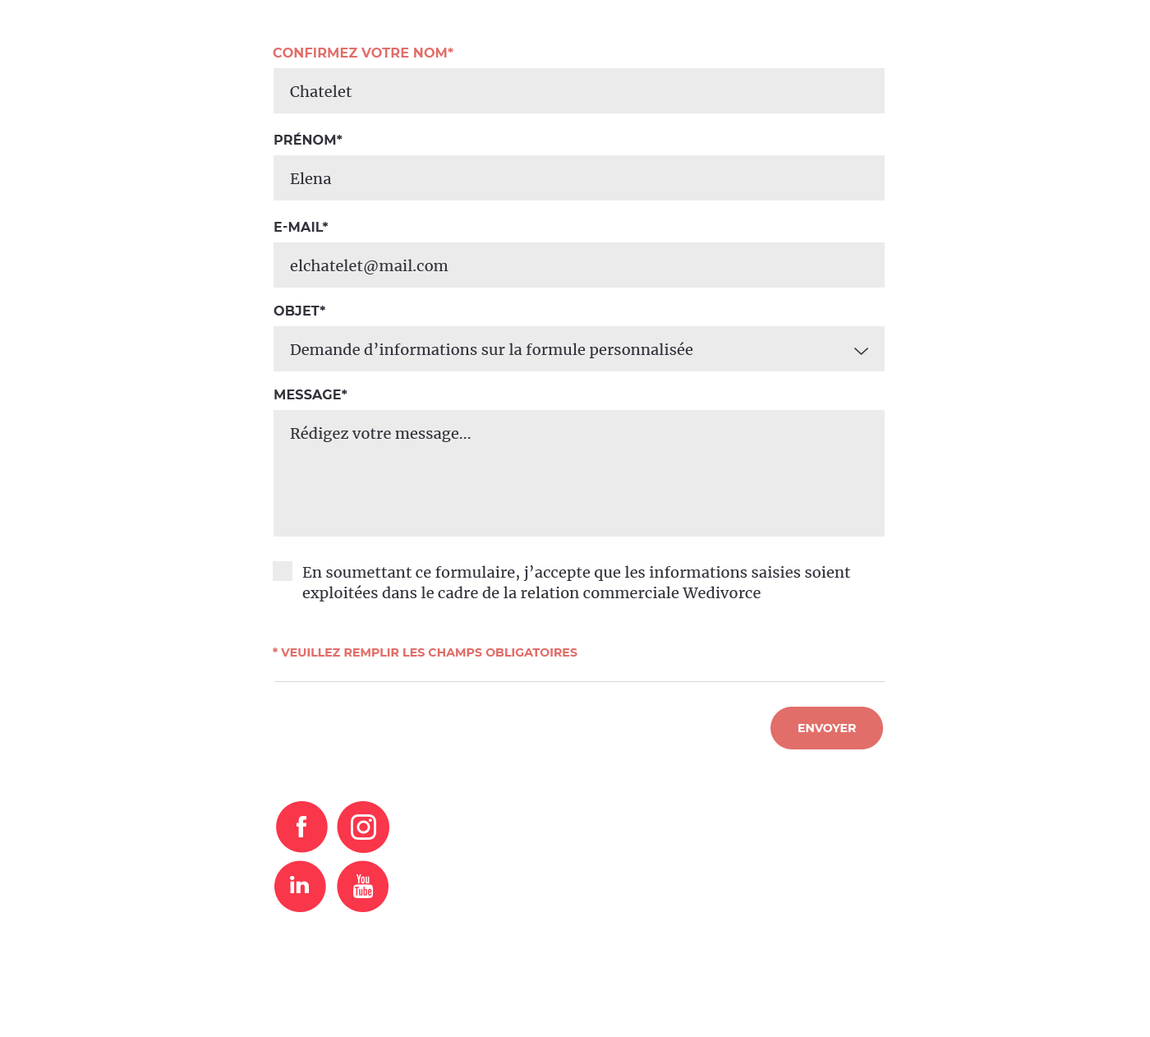
<style>
.page{position:relative;width:1150px;height:1037px;background:#ffffff}
.page>*{position:absolute;margin:0}
.t1{font:13.1px "Montserrat-Bold";letter-spacing:0.01em;color:#e16e69;text-transform:uppercase}
.t2{font:14.8px "Merriweather-Regular";letter-spacing:0.01em;color:#33313b}
.t3{font:13.1px "Montserrat-Bold";letter-spacing:0.01em;color:#33313b;text-transform:uppercase}
.t4{font:14.8px/20.5px "Merriweather-Regular";letter-spacing:0.01em;color:#33313b}
.t5{font:11.5px "Montserrat-Bold";letter-spacing:0.01em;color:#e16e69;text-transform:uppercase}
.t6{font:11.5px "Montserrat-Bold";color:#ffffff;text-transform:uppercase}
</style>
<div class="page">
<p class="t1" style="left:273px;top:48px;width:180px;height:10px">Confirmez votre Nom*</p>
<p class="t2" style="left:290px;top:85px;width:62px;height:12px">Chatelet</p>
<p class="t3" style="left:274px;top:132px;width:69px;height:13px">Prénom*</p>
<p class="t2" style="left:290px;top:172px;width:41px;height:12px">Elena</p>
<p class="t3" style="left:274px;top:222px;width:55px;height:10px">e-mail*</p>
<p class="t2" style="left:290px;top:259px;width:159px;height:15px">elchatelet@mail.com</p>
<p class="t3" style="left:274px;top:306px;width:51px;height:9px">Objet*</p>
<p class="t2" style="left:290px;top:342px;width:403px;height:16px">Demande d’informations sur la formule personnalisée</p>
<p class="t3" style="left:274px;top:389px;width:74px;height:10px">Message*</p>
<p class="t2" style="left:290px;top:426px;width:181px;height:16px">Rédigez votre message...</p>
<p class="t4" style="left:302px;top:565px;width:548px;height:36px">En soumettant ce formulaire, j’accepte que les informations saisies soient <br>exploitées dans le cadre de la relation commerciale Wedivorce</p>
<p class="t5" style="left:273px;top:647px;width:305px;height:9px">* Veuillez remplir les Champs obligatoires</p>
<p class="t6" style="left:799px;top:724px;width:57px;height:8px">Envoyer</p>
</div>
